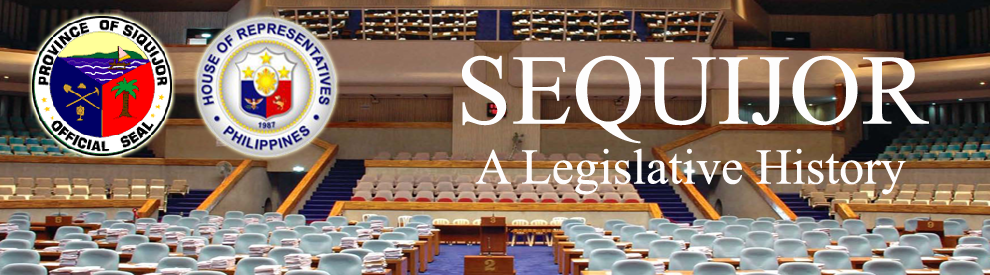
<style>
.page{position:relative;width:990px;height:275px}
.page>*{position:absolute;margin:0}
.t1{font:50px "TimesNewRomanPSMT";color:#fdfcfc}
.t2{font:100px "TimesNewRomanPSMT";color:#fdfdfd}
</style>
<div class="page">
<p class="t1" style="left:462px;top:55px;width:467px;height:140px;text-align:center"><span class="t2">SEQUIJOR<br></span>A Legislative History</p>
</div>
